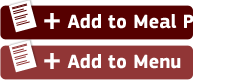
<style>
.page{position:relative;width:230px;height:80px;background:#ffffff}
.page>*{position:absolute;margin:0}
.t1{font:30px "MyriadPro-Black";color:#ffffff}
.t2{font:20px "PFSquareSansPro-Bold";color:#ffffff}
</style>
<div class="page">
<p class="t1" style="left:44px;top:13px;width:16px;height:16px">+</p>
<p class="t2" style="left:67px;top:14px;width:155px;height:15px">Add to Meal Plan</p>
<p class="t1" style="left:44px;top:53px;width:16px;height:16px">+</p>
<p class="t2" style="left:67px;top:54px;width:114px;height:15px">Add to Menu</p>
</div>
